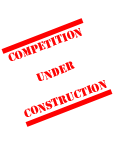
<style>
.page{position:relative;width:113px;height:143px;background:#ffffff}
.page>*{position:absolute;margin:0}
.t1{font:12px "Stencil";color:#fe0505}
</style>
<div class="page">
<p class="t1" style="left:8px;top:28px;width:99px;height:89px;text-align:center;rotate:-21deg">Competition<br><br>Under<br><br>Construction</p>
</div>
